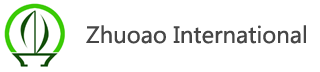
<style>
.page{position:relative;width:320px;height:72px;background:#ffffff}
.page>*{position:absolute;margin:0}
.t1{font:22px "MicrosoftYaHei";color:#464646}
</style>
<div class="page">
<p class="t1" style="left:86px;top:25px;width:220px;height:19px">Zhuoao International</p>
</div>
